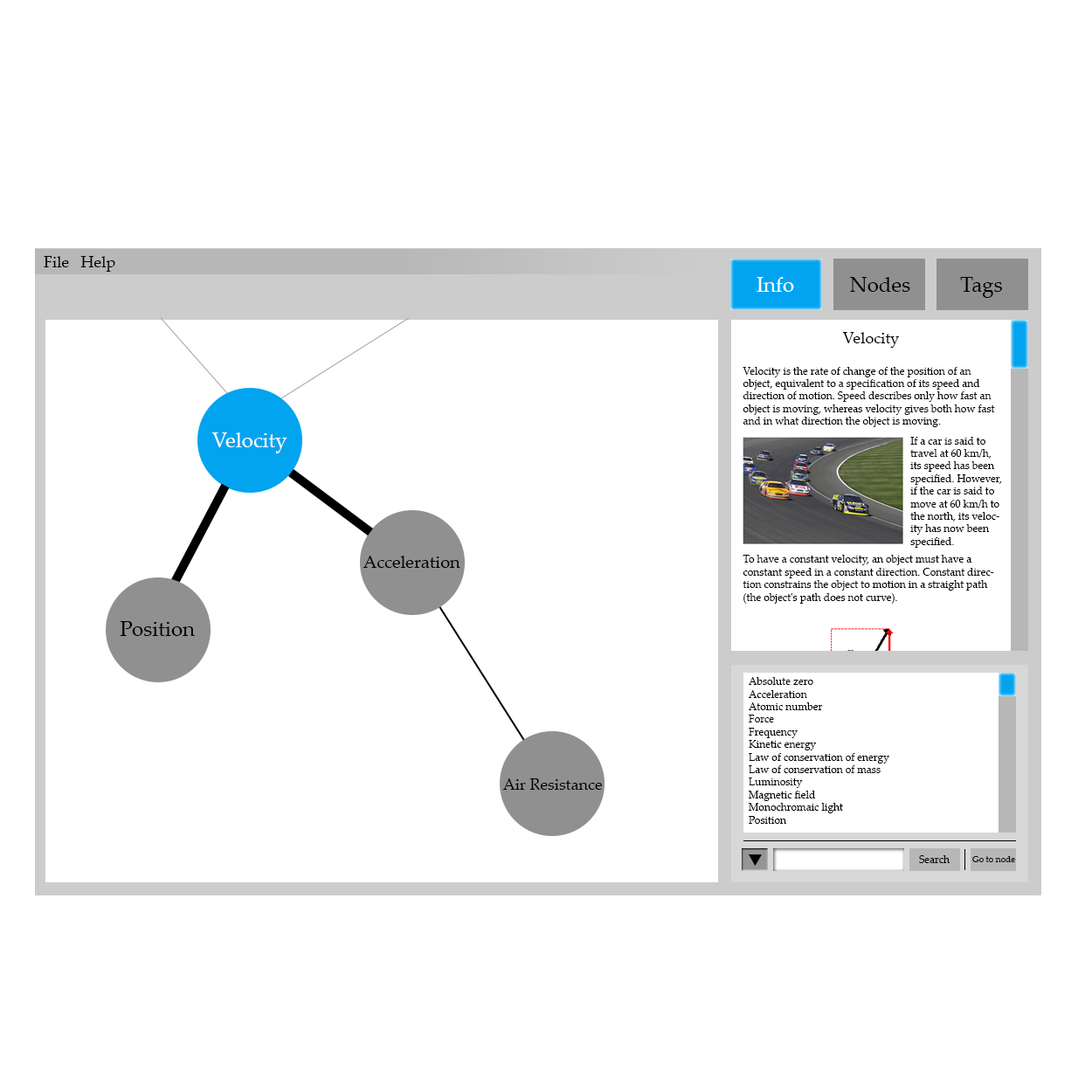
<style>
.page{position:relative;width:1092px;height:1092px;background:#ffffff}
.page>*{position:absolute;margin:0}
.t1{font:15.7px "PalatinoLinotype-Roman";color:#000000}
.t2{font:21px "PalatinoLinotype-Roman";color:#ffffff}
.t3{font:21px "PalatinoLinotype-Roman";color:#000000}
.t4{font:10.5px "PalatinoLinotype-Roman";color:#000000}
.t5{font:17.5px "PalatinoLinotype-Roman";color:#000000}
.t6{font:14px "PalatinoLinotype-Roman";color:#000000}
.t7{font:8.7px "PalatinoLinotype-Roman";color:#000000}
</style>
<div class="page">
<p class="t1" style="left:44px;top:256px;width:71px;height:16px">File   Help</p>
<p class="t2" style="left:757px;top:277px;width:37px;height:15px"><span class="t3"><br></span>Info</p>
<p class="t3" style="left:850px;top:277px;width:60px;height:15px">Nodes</p>
<p class="t3" style="left:960px;top:277px;width:42px;height:21px">Tags</p>
<p class="t4" style="left:743px;top:332px;width:252px;height:272px;text-align:center"><span class="t1">Velocity<br><br></span>Velocity is the rate of change of the position of an object, equivalent to a specification of its speed and direction of motion. Speed describes only how fast an object is moving, whereas velocity gives both how fast and in what direction the object is moving.<br><br><br><br><br><br><br><br><br><br><br>To have a constant velocity, an object must have a constant speed in a constant direction. Constant direction constrains the object to motion in a straight path (the object's path does not curve).</p>
<p class="t2" style="left:211px;top:432px;width:76px;height:21px"><span class="t4"><br></span>Velocity</p>
<p class="t4" style="left:910px;top:437px;width:92px;height:111px">If a car is said to travel at 60 km/h, its speed has been specified. However, if the car is said to move at 60 km/h to the north, its velocity has now been specified.</p>
<p class="t5" style="left:363px;top:556px;width:97px;height:12px"><span class="t6"><br><br><br></span>Acceleration</p>
<p class="t3" style="left:120px;top:621px;width:75px;height:15px"><span class="t6"><br><br></span>Position</p>
<p class="t4" style="left:749px;top:677px;width:140px;height:147px">Absolute zero<br>Acceleration<br>Atomic number<br>Force<br>Frequency<br>Kinetic energy<br>Law of conservation of energy<br>Law of conservation of mass<br>Luminosity<br>Magnetic field<br>Monochromaic light<br>Position</p>
<p class="t1" style="left:503px;top:778px;width:99px;height:12px"><span class="t6"><br><br></span><br>Air Resistance</p>
<p class="t4" style="left:919px;top:855px;width:31px;height:8px">Search</p>
<p class="t7" style="left:972px;top:856px;width:43px;height:6px">Go to node</p>
</div>
